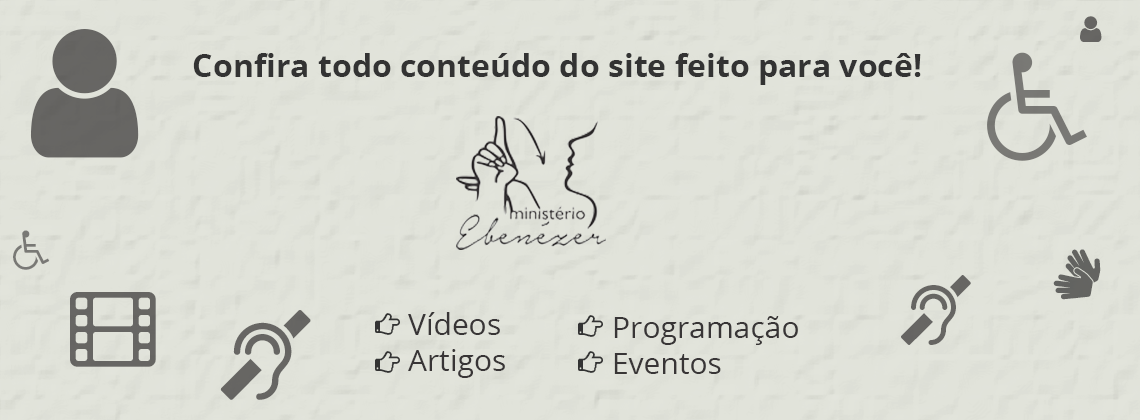
<style>
.page{position:relative;width:1140px;height:420px;background:#e1e3da}
.page>*{position:absolute;margin:0}
.t1{font:32px "OpenSans-Bold";color:#333333}
.t2{font:30px "OpenSans";color:#383536}
</style>
<div class="page">
<p class="t1" style="left:193px;top:53px;width:728px;height:32px">Confira todo conteúdo do site feito para você!</p>
<p class="t2" style="left:408px;top:312px;width:97px;height:66px">Vídeos<br>Artigos</p>
<p class="t2" style="left:614px;top:316px;width:184px;height:58px">Programação<br>Eventos</p>
</div>
